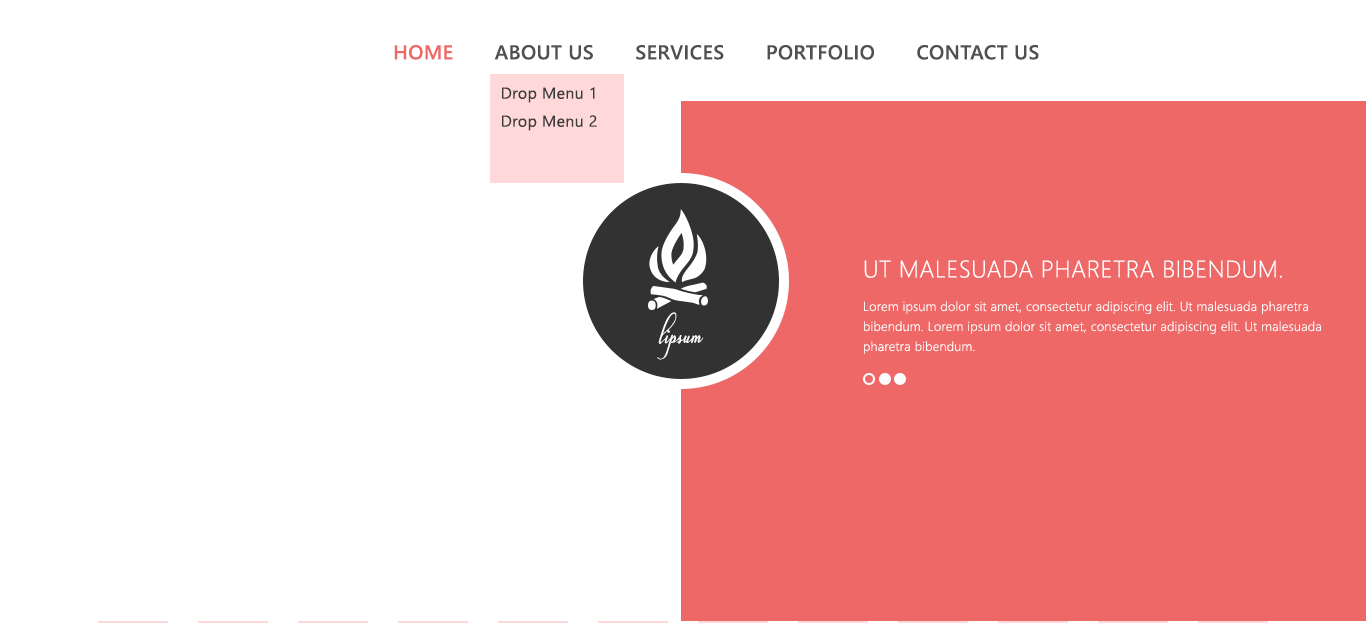
<style>
.page{position:relative;width:1366px;height:623px;background:#ffffff}
.page>*{position:absolute;margin:0}
.t1{font:20px "SegoeUI-Semibold";letter-spacing:0.02em;color:#505050;text-transform:uppercase}
.t2{font:20px "SegoeUI-Semibold";letter-spacing:0.02em;color:#ee6867;text-transform:uppercase}
.t3{font:16px/28px "SegoeUI";letter-spacing:0.02em;color:#3b3b3b}
.t4{font:24px "SegoeUI-Light";letter-spacing:0.02em;color:#ffffff;text-transform:uppercase}
.t5{font:13px/20px "SegoeUI-Light";letter-spacing:0.02em;color:#ffffff}
.t6{font:29.3px "PlebeyaSwash";letter-spacing:0.02em;color:#ffffff;scale:0.84 1}
</style>
<div class="page">
<p class="t1" style="left:394px;top:45px;width:645px;height:15px"><span class="t2">Home</span>       About Us       Services       Portfolio       Contact Us</p>
<p class="t3" style="left:502px;top:87px;width:95px;height:44px;text-align:center">Drop Menu 1<br>Drop Menu 2</p>
<p class="t4" style="left:864px;top:260px;width:418px;height:18px">Ut malesuada pharetra bibendum.</p>
<p class="t5" style="left:864px;top:301px;width:457px;height:53px">Lorem ipsum dolor sit amet, consectetur adipiscing elit. Ut malesuada pharetra bibendum. Lorem ipsum dolor sit amet, consectetur adipiscing elit. Ut malesuada pharetra bibendum.</p>
<p class="t6" style="left:657px;top:312px;width:47px;height:48px">lipsum</p>
</div>
